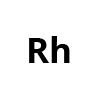
<style>
.page{position:relative;width:100px;height:100px;background:#ffffff}
.page>*{position:absolute;margin:0}
.t1{font:35px "OpenSans-Bold";color:#000000}
</style>
<div class="page">
<p class="t1" style="left:29px;top:36px;width:41px;height:27px">Rh</p>
</div>
